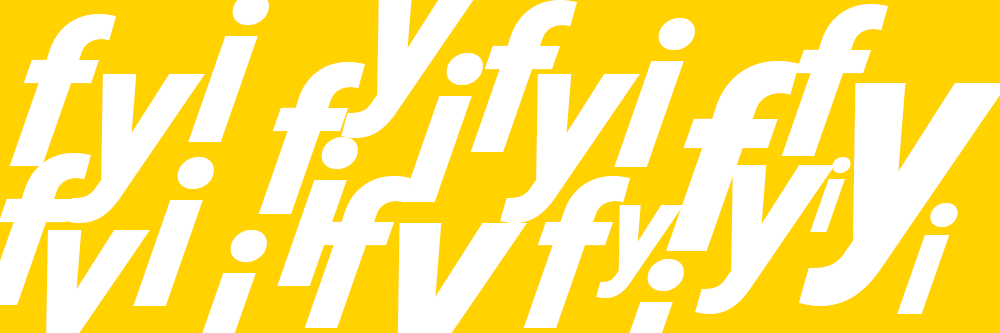
<style>
.page{position:relative;width:1000px;height:333px;background:#ffd200}
.page>*{position:absolute;margin:0}
.t1{font:200px "Roboto-BlackItalic";color:#ffffff;font-style:italic}
.t2{font:250px "Roboto-BlackItalic";color:#ffffff;font-style:italic}
.t3{font:100px "Roboto-BlackItalic";color:#ffffff;font-style:italic}
.t4{font:125px "Roboto-BlackItalic";color:#ffffff;font-style:italic}
.t5{font:150px "Roboto-BlackItalic";color:#ffffff;font-style:italic}
</style>
<div class="page">
<p class="t1" style="left:470px;top:0px;width:107px;height:152px">f</p>
<p class="t1" style="left:781px;top:4px;width:107px;height:152px">f</p>
<p class="t1" style="left:9px;top:14px;width:107px;height:152px">f</p>
<p class="t1" style="left:614px;top:18px;width:81px;height:149px">i</p>
<p class="t1" style="left:402px;top:53px;width:81px;height:149px">i</p>
<p class="t1" style="left:258px;top:62px;width:107px;height:152px">f</p>
<p class="t2" style="left:666px;top:61px;width:133px;height:190px">f</p>
<p class="t1" style="left:65px;top:74px;width:140px;height:149px">y</p>
<p class="t1" style="left:500px;top:74px;width:140px;height:149px">y</p>
<p class="t1" style="left:277px;top:137px;width:81px;height:149px">i</p>
<p class="t1" style="left:133px;top:157px;width:81px;height:149px">i</p>
<p class="t3" style="left:810px;top:157px;width:41px;height:75px">i</p>
<p class="t1" style="left:695px;top:165px;width:140px;height:149px">y</p>
<p class="t1" style="left:304px;top:176px;width:107px;height:152px">f</p>
<p class="t1" style="left:523px;top:176px;width:107px;height:152px">f</p>
<p class="t4" style="left:596px;top:205px;width:88px;height:93px">y</p>
<p class="t5" style="left:897px;top:203px;width:61px;height:111px">i</p>
</div>
